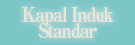
<style>
.page{position:relative;width:135px;height:45px;background:#7dc6c6}
.page>*{position:absolute;margin:0}
.t1{font:20px/16px "RyuminPro-ExBold";letter-spacing:-0.08em;color:#f1e6d8;scale:0.9 1}
</style>
<div class="page">
<p class="t1" style="left:22px;top:7px;width:92px;height:31px;text-align:center">Kapal Induk<br>Standar</p>
</div>
